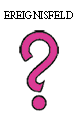
<style>
.page{position:relative;width:76px;height:124px;background:#ffffff}
.page>*{position:absolute;margin:0}
.t1{font:12px "AdobeDevanagari-Regular";color:#000000;scale:0.9 1}
</style>
<div class="page">
<p class="t1" style="left:4px;top:11px;width:69px;height:8px">EREIGNISFELD</p>
</div>
